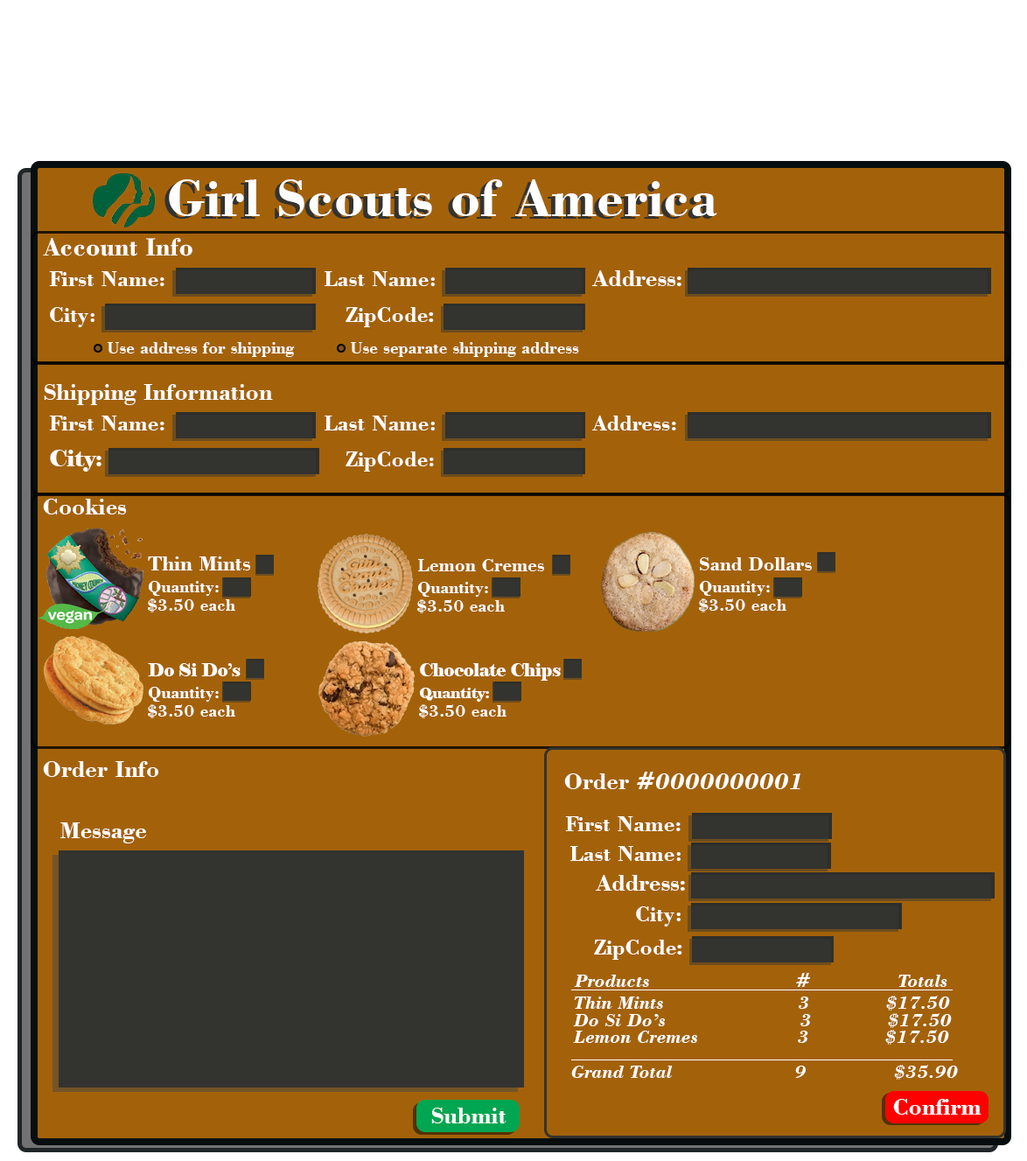
<style>
.page{position:relative;width:1027px;height:1161px;background:#a36209}
.page>*{position:absolute;margin:0}
.t1{font:55.1px "BodoniBT-Bold"}
.t2{font:55.1px "BodoniBT-Bold";color:#fefefe}
.t3{font:26.2px "BodoniBT-Bold";color:#ffffff}
.t4{font:22.7px "BodoniBT-Bold";color:#ffffff}
.t5{font:24.5px "BodoniBT-Bold";color:#ffffff}
.t6{font:20.1px "Elephant-Regular";color:#ffffff}
.t7{font:17.5px "BodoniBT-Bold";color:#ffffff}
.t8{font:22.7px "BodoniBT-Bold";color:#feffff}
.t9{font:22.7px "Elephant-Regular";color:#ffffff}
.t10{font:24.5px "BodoniBT-Bold";color:#fefefe}
.t11{font:21.9px "BodoniBT-Bold";color:#ffffff}
.t12{font:20.1px "BodoniBT-Bold";color:#ffffff}
.t13{font:19.2px "BodoniBT-Bold";color:#ffffff}
.t14{font:17.5px "Elephant-Regular";color:#ffffff}
.t15{font:14.9px "Elephant-Regular";color:#ffffff}
.t16{font:24.5px "BodoniBT-BoldItalic";color:#fefefe}
.t17{font:19.2px "BodoniBT-BoldItalic";color:#ffffff}
</style>
<div class="page">
<p class="t1" style="left:164px;top:182px;width:549px;height:37px">Girl Scouts of America</p>
<p class="t2" style="left:169px;top:179px;width:548px;height:37px">Girl Scouts of America</p>
<p class="t3" style="left:43px;top:238px;width:149px;height:18px">Account Info</p>
<p class="t4" style="left:49px;top:271px;width:115px;height:15px">First Name:</p>
<p class="t4" style="left:325px;top:271px;width:110px;height:15px">Last Name:</p>
<p class="t5" style="left:592px;top:270px;width:90px;height:16px">Address<span class="t6">:</span></p>
<p class="t4" style="left:50px;top:307px;width:44px;height:20px">City:</p>
<p class="t4" style="left:346px;top:307px;width:88px;height:20px">ZipCode<span class="t6">:</span></p>
<p class="t7" style="left:108px;top:342px;width:187px;height:15px">Use address for shipping</p>
<p class="t7" style="left:351px;top:342px;width:228px;height:15px">Use separate shipping address</p>
<p class="t5" style="left:44px;top:384px;width:229px;height:21px">Shipping Information</p>
<p class="t4" style="left:49px;top:416px;width:115px;height:14px">First Name:</p>
<p class="t4" style="left:325px;top:416px;width:110px;height:14px">Last Name:</p>
<p class="t8" style="left:592px;top:416px;width:84px;height:14px">Address:</p>
<p class="t9" style="left:50px;top:450px;width:51px;height:22px">City:</p>
<p class="t8" style="left:346px;top:451px;width:88px;height:21px">ZipCode:</p>
<p class="t10" style="left:43px;top:499px;width:84px;height:15px">Cookies</p>
<p class="t11" style="left:148px;top:556px;width:102px;height:14px">Thin Mints</p>
<p class="t12" style="left:700px;top:557px;width:112px;height:13px">Sand Dollars</p>
<p class="t13" style="left:418px;top:559px;width:126px;height:12px">Lemon Cremes</p>
<p class="t7" style="left:148px;top:581px;width:71px;height:15px">Quantity:</p>
<p class="t7" style="left:417px;top:582px;width:71px;height:15px">Quantity:</p>
<p class="t7" style="left:699px;top:581px;width:71px;height:15px">Quantity:</p>
<p class="t7" style="left:148px;top:598px;width:87px;height:14px">$3.50 each</p>
<p class="t7" style="left:417px;top:599px;width:88px;height:14px">$3.50 each</p>
<p class="t7" style="left:699px;top:598px;width:88px;height:14px">$3.50 each</p>
<p class="t14" style="left:148px;top:663px;width:93px;height:13px">Do Si Do’s</p>
<p class="t14" style="left:420px;top:663px;width:141px;height:18px">Chocolate Chips</p>
<p class="t7" style="left:148px;top:687px;width:71px;height:15px">Quantity:</p>
<p class="t15" style="left:420px;top:688px;width:69px;height:14px">Quantity:</p>
<p class="t7" style="left:148px;top:704px;width:87px;height:14px">$3.50 each</p>
<p class="t7" style="left:419px;top:704px;width:88px;height:14px">$3.50 each</p>
<p class="t10" style="left:43px;top:761px;width:115px;height:16px">Order Info</p>
<p class="t16" style="left:564px;top:772px;width:237px;height:17px"><span class="t10">Order </span>#0000000001</p>
<p class="t4" style="left:565px;top:816px;width:116px;height:15px">First Name:</p>
<p class="t10" style="left:60px;top:822px;width:86px;height:21px">Message</p>
<p class="t4" style="left:570px;top:846px;width:111px;height:15px">Last Name:</p>
<p class="t5" style="left:596px;top:875px;width:89px;height:16px">Address<span class="t6">:</span></p>
<p class="t4" style="left:636px;top:906px;width:45px;height:20px">City:</p>
<p class="t4" style="left:594px;top:940px;width:88px;height:20px">ZipCode<span class="t6">:</span></p>
<p class="t17" style="left:574px;top:973px;width:373px;height:14px">Products                         #               Totals</p>
<p class="t17" style="left:574px;top:996px;width:376px;height:14px">Thin Mints                       3             $17.50</p>
<p class="t17" style="left:573px;top:1013px;width:379px;height:15px">Do Si Do’s                       3             $17.50</p>
<p class="t17" style="left:573px;top:1030px;width:376px;height:15px">Lemon Cremes                 3             $17.50</p>
<p class="t17" style="left:571px;top:1065px;width:387px;height:15px">Grand Total                     9               $35.90</p>
<p class="t10" style="left:431px;top:1108px;width:76px;height:15px">Submit</p>
<p class="t10" style="left:893px;top:1099px;width:89px;height:16px">Confirm</p>
</div>
